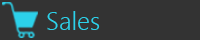
<style>
.page{position:relative;width:200px;height:40px;background:#333333}
.page>*{position:absolute;margin:0}
.t1{font:25px "SegoeUI-Semilight";color:#2cd1ea}
</style>
<div class="page">
<p class="t1" style="left:47px;top:11px;width:53px;height:19px">Sales</p>
</div>
